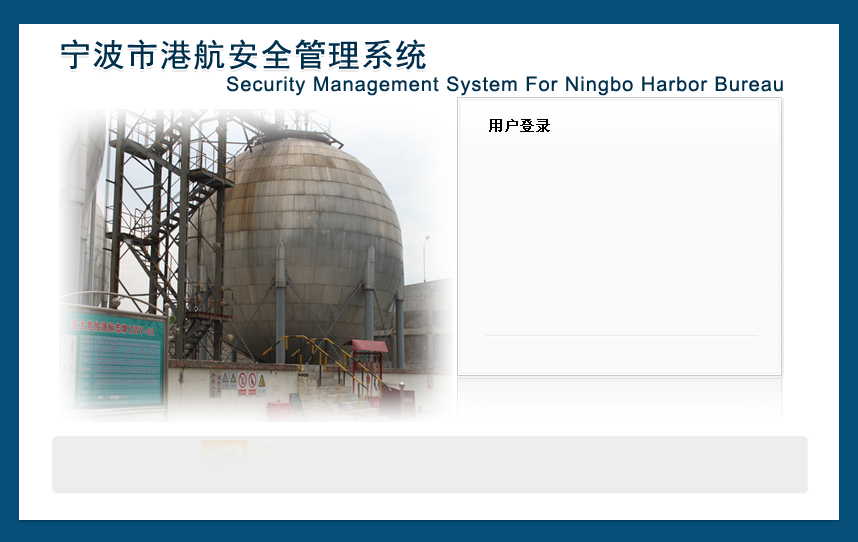
<style>
.page{position:relative;width:858px;height:542px;background:#ffffff}
.page>*{position:absolute;margin:0}
.t1{font:32px "SimHei";letter-spacing:0.05em;color:#01304e}
.t2{font:20px "ArialMT";letter-spacing:0.05em;color:#01304e}
.t3{font:14px "SimSun";letter-spacing:0.05em;color:#000000;font-weight:bold}
</style>
<div class="page">
<p class="t1" style="left:61px;top:39px;width:365px;height:31px">宁波市港航安全管理系统</p>
<p class="t2" style="left:226px;top:76px;width:557px;height:20px">Security Management System For Ningbo Harbor Bureau</p>
<p class="t3" style="left:489px;top:119px;width:61px;height:13px">用户登录</p>
</div>
